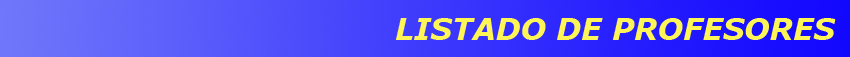
<style>
.page{position:relative;width:850px;height:57px}
.page>*{position:absolute;margin:0}
.t1{font:30px "Verdana-BoldItalic";color:#fff557}
</style>
<div class="page">
<p class="t1" style="left:396px;top:18px;width:440px;height:22px">LISTADO DE PROFESORES</p>
</div>
